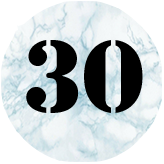
<style>
.page{position:relative;width:164px;height:164px;background:#ffffff}
.page>*{position:absolute;margin:0}
.t1{font:95.5px "StencilStd";color:#000000}
</style>
<div class="page">
<p class="t1" style="left:26px;top:40px;width:117px;height:73px">30</p>
</div>
